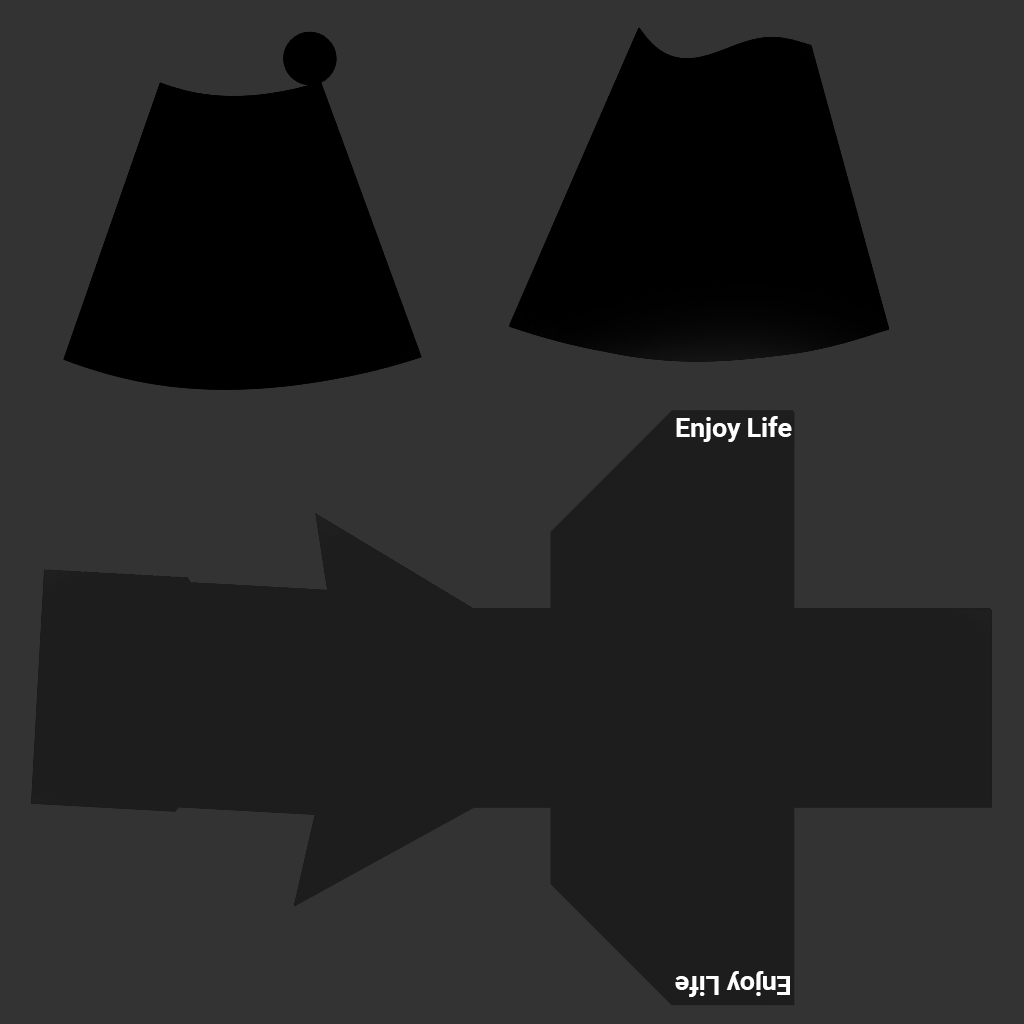
<style>
.page{position:relative;width:1024px;height:1024px;background:#333333}
.page>*{position:absolute;margin:0}
.t1{font:26.6px "Roboto-Bold";color:#ffffff}
</style>
<div class="page">
<p class="t1" style="left:676px;top:416px;width:116px;height:26px">Enjoy Life</p>
<p class="t1" style="left:675px;top:971px;width:115px;height:26px;rotate:180deg">Enjoy Life</p>
</div>
